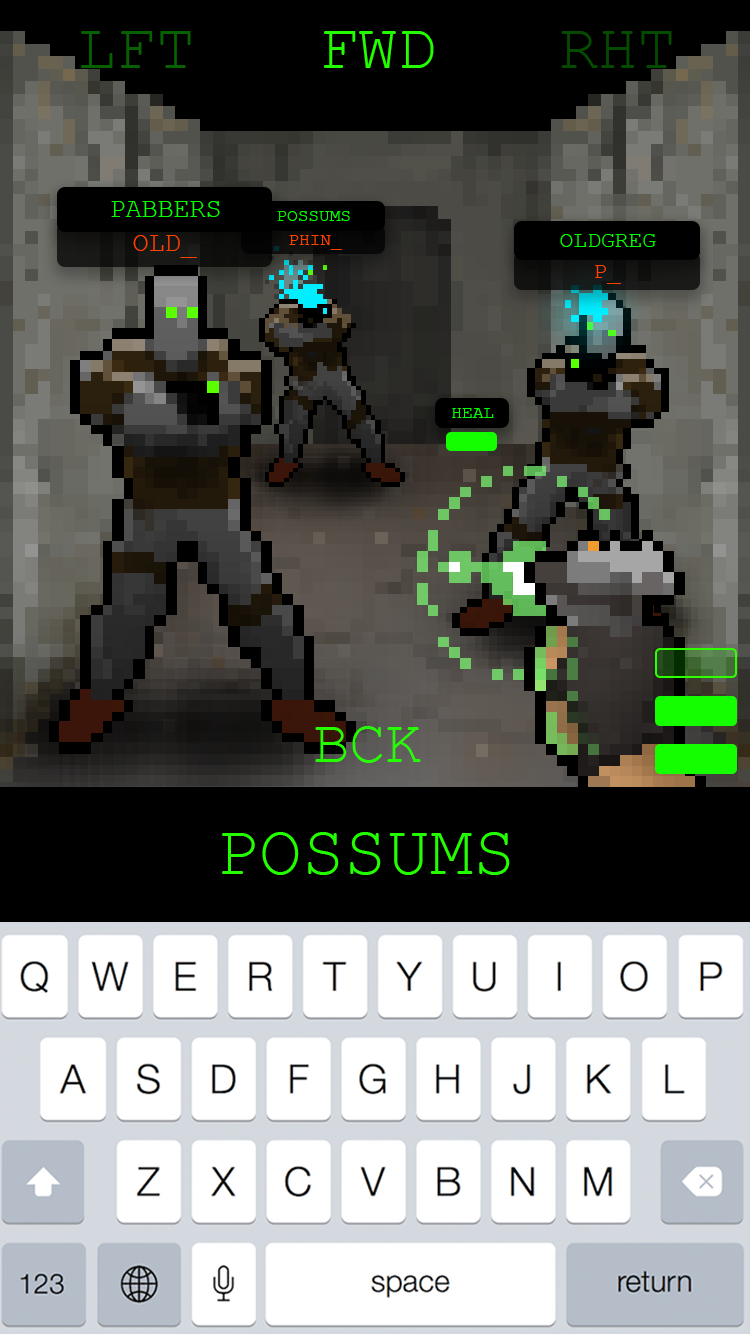
<style>
.page{position:relative;width:750px;height:1334px;background:#000000}
.page>*{position:absolute;margin:0}
.t1{font:65.4px "CourierNewPSMT";color:#076100;text-transform:uppercase}
.t2{font:65.4px "CourierNewPSMT";color:#24ff00;text-transform:uppercase}
.t3{font:65.4px "CourierNewPSMT";color:#044b00;text-transform:uppercase}
.t4{font:26.6px "CourierNewPSMT";color:#06ff00;text-transform:uppercase}
.t5{font:17.6px "CourierNewPSMT";color:#06ff00;text-transform:uppercase}
.t6{font:26.6px "CourierNewPSMT";color:#ff4200;text-transform:uppercase}
.t7{font:17.6px "CourierNewPSMT";color:#ff4200;text-transform:uppercase}
.t8{font:22.9px "CourierNewPSMT";color:#06ff00;text-transform:uppercase}
.t9{font:22.9px "CourierNewPSMT";color:#ff4200;text-transform:uppercase}
.t10{font:60.6px "CourierNewPSMT";color:#24ff00;text-transform:uppercase}
.t11{font:71.4px "CourierNewPSMT";color:#24ff00;text-transform:uppercase}
</style>
<div class="page">
<p class="t1" style="left:81px;top:31px;width:110px;height:37px">lft</p>
<p class="t2" style="left:324px;top:31px;width:110px;height:37px">Fwd</p>
<p class="t3" style="left:561px;top:31px;width:111px;height:37px">rht</p>
<p class="t4" style="left:111px;top:201px;width:109px;height:16px">pabbers</p>
<p class="t5" style="left:277px;top:211px;width:73px;height:10px">Possums</p>
<p class="t6" style="left:133px;top:235px;width:64px;height:23px">old_</p>
<p class="t7" style="left:289px;top:235px;width:53px;height:15px">Phin_</p>
<p class="t8" style="left:560px;top:234px;width:96px;height:13px">oldgreg</p>
<p class="t9" style="left:595px;top:265px;width:26px;height:19px">p_</p>
<p class="t5" style="left:452px;top:408px;width:42px;height:10px">Heal</p>
<p class="t10" style="left:315px;top:726px;width:106px;height:37px">bck</p>
<p class="t11" style="left:222px;top:832px;width:288px;height:43px">Possums</p>
</div>
